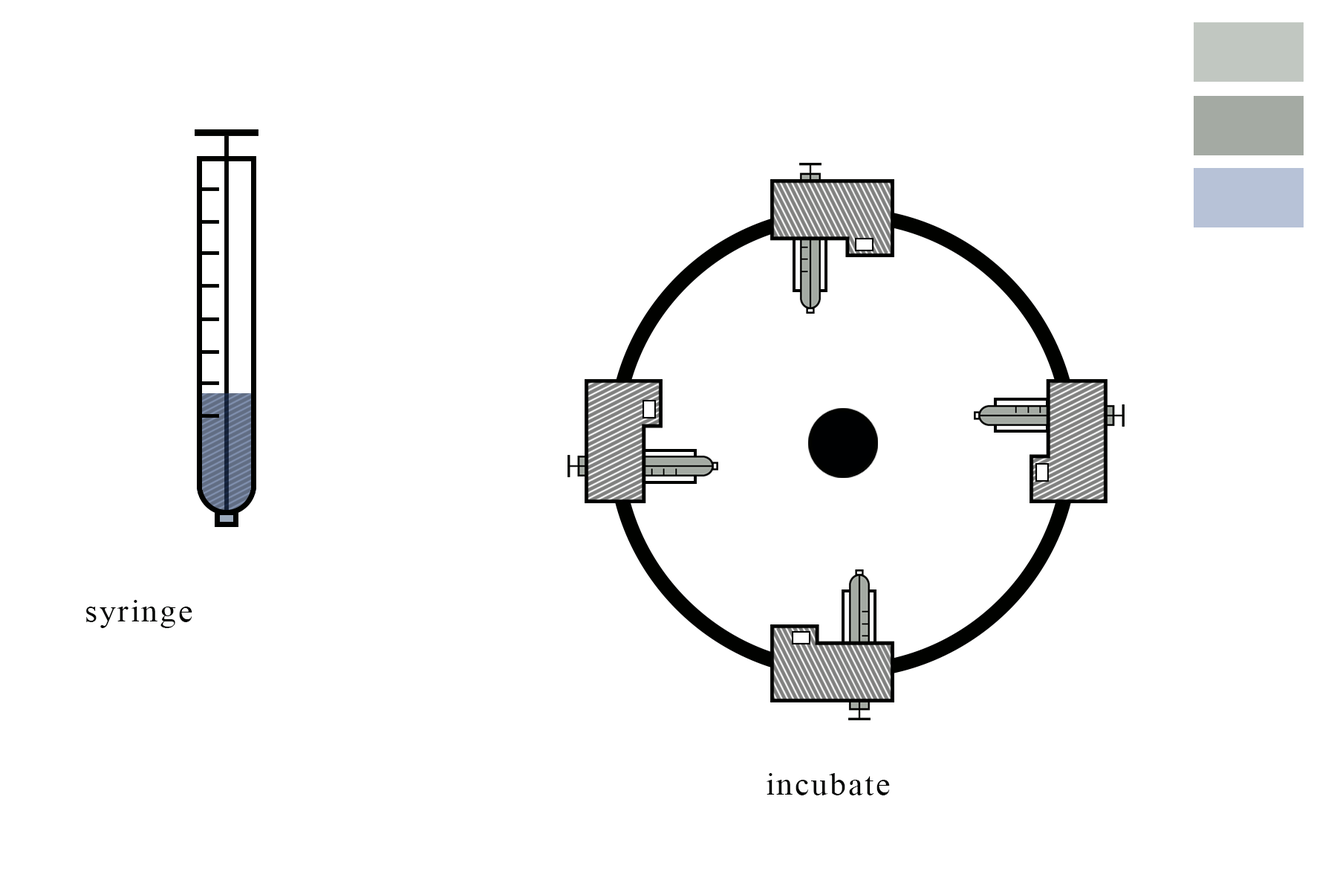
<style>
.page{position:relative;width:1337px;height:892px;background:#ffffff}
.page>*{position:absolute;margin:0}
.t1{font:53.5px "TimesNewRomanPSMT";letter-spacing:0.06em;color:#000200;scale:1.05 1}
</style>
<div class="page">
<p class="t1" style="left:86px;top:600px;width:106px;height:28px">syringe</p>
<p class="t1" style="left:767px;top:773px;width:123px;height:22px">incubate</p>
</div>
